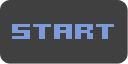
<style>
.page{position:relative;width:128px;height:64px;background:#404040}
.page>*{position:absolute;margin:0}
.t1{font:40px "AcknowledgeTT-BRK-";color:#7d9adb}
</style>
<div class="page">
<p class="t1" style="left:12px;top:24px;width:102px;height:15px">START</p>
</div>
